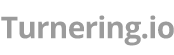
<style>
.page{position:relative;width:174px;height:55px;background:#ffffff}
.page>*{position:absolute;margin:0}
.t1{font:29.9px "OpenSans-Bold";letter-spacing:-0.025em;color:#9b9b9b}
</style>
<div class="page">
<p class="t1" style="left:1px;top:15px;width:173px;height:31px">Turnering.io</p>
<p class="t1" style="left:1px;top:15px;width:173px;height:31px">Turnering.io</p>
</div>
